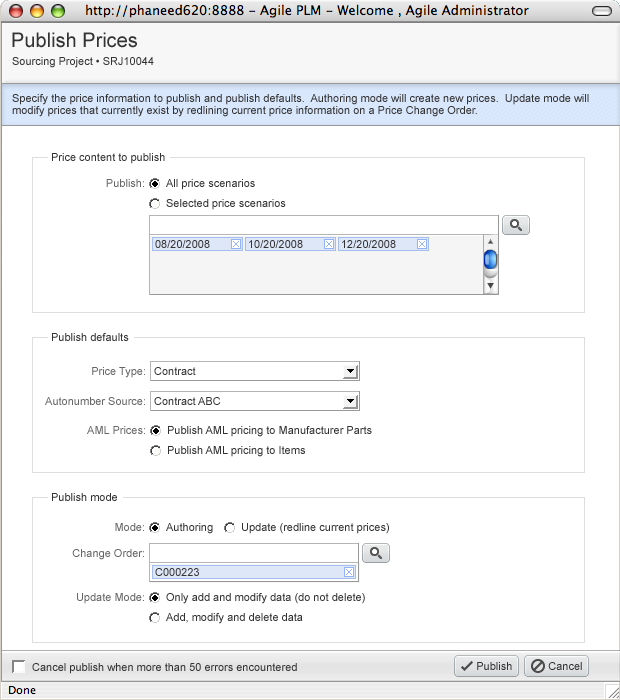
<style>
.page{position:relative;width:620px;height:700px;background:#ffffff}
.page>*{position:absolute;margin:0}
.t1{font:20px "ArialMT";color:#333333}
.t2{font:11px "ArialMT";color:#333333}
.t3{font:11px/12px "ArialMT";color:#333333}
.t4{font:11px "ArialMT";color:#666666}
</style>
<div class="page">
<p class="t1" style="left:12px;top:32px;width:125px;height:16px">Publish Prices</p>
<p class="t2" style="left:12px;top:57px;width:142px;height:11px">Sourcing Project • SRJ10044</p>
<p class="t3" style="left:12px;top:94px;width:577px;height:23px">Specify the price information to publish and publish defaults.  Authoring mode will create new prices.  Update mode will<br>modify prices that currently exist by redlining current price information on a Price Change Order.</p>
<p class="t2" style="left:52px;top:153px;width:113px;height:11px">Price content to publish</p>
<p class="t4" style="left:106px;top:179px;width:38px;height:8px">Publish:</p>
<p class="t2" style="left:166px;top:179px;width:89px;height:11px">All price scenarios</p>
<p class="t2" style="left:166px;top:199px;width:120px;height:11px">Selected price scenarios</p>
<p class="t2" style="left:155px;top:240px;width:55px;height:8px">08/20/2008</p>
<p class="t2" style="left:249px;top:240px;width:54px;height:8px">10/20/2008</p>
<p class="t2" style="left:342px;top:240px;width:54px;height:8px">12/20/2008</p>
<p class="t2" style="left:52px;top:333px;width:77px;height:8px">Publish defaults</p>
<p class="t4" style="left:92px;top:367px;width:53px;height:11px">Price Type:</p>
<p class="t2" style="left:154px;top:367px;width:42px;height:8px">Contract</p>
<p class="t4" style="left:45px;top:397px;width:100px;height:8px">Autonumber Source:</p>
<p class="t2" style="left:154px;top:397px;width:67px;height:8px">Contract ABC</p>
<p class="t4" style="left:87px;top:426px;width:58px;height:8px">AML Prices:</p>
<p class="t2" style="left:168px;top:426px;width:204px;height:11px">Publish AML pricing to Manufacturer Parts</p>
<p class="t2" style="left:168px;top:446px;width:137px;height:11px">Publish AML pricing to Items</p>
<p class="t2" style="left:52px;top:493px;width:65px;height:8px">Publish mode</p>
<p class="t4" style="left:115px;top:523px;width:29px;height:8px">Mode:</p>
<p class="t2" style="left:166px;top:523px;width:47px;height:11px">Authoring</p>
<p class="t2" style="left:242px;top:523px;width:147px;height:11px">Update (redline current prices)</p>
<p class="t4" style="left:72px;top:549px;width:72px;height:11px">Change Order:</p>
<p class="t2" style="left:155px;top:568px;width:44px;height:8px">C000223</p>
<p class="t4" style="left:77px;top:593px;width:67px;height:11px">Update Mode:</p>
<p class="t2" style="left:166px;top:593px;width:199px;height:11px">Only add and modify data (do not delete)</p>
<p class="t2" style="left:166px;top:613px;width:137px;height:11px">Add, modify and delete data</p>
<p class="t2" style="left:32px;top:663px;width:265px;height:11px">Cancel publish when more than 50 errors encountered</p>
<p class="t2" style="left:477px;top:662px;width:35px;height:8px">Publish</p>
<p class="t2" style="left:548px;top:662px;width:34px;height:8px">Cancel</p>
</div>
